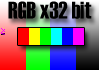
<style>
.page{position:relative;width:99px;height:70px}
.page>*{position:absolute;margin:0}
.t1{font:24px "Haettenschweiler";color:#000000}
</style>
<div class="page">
<p class="t1" style="left:8px;top:1px;width:84px;height:18px">RGB x32 bit</p>
</div>
